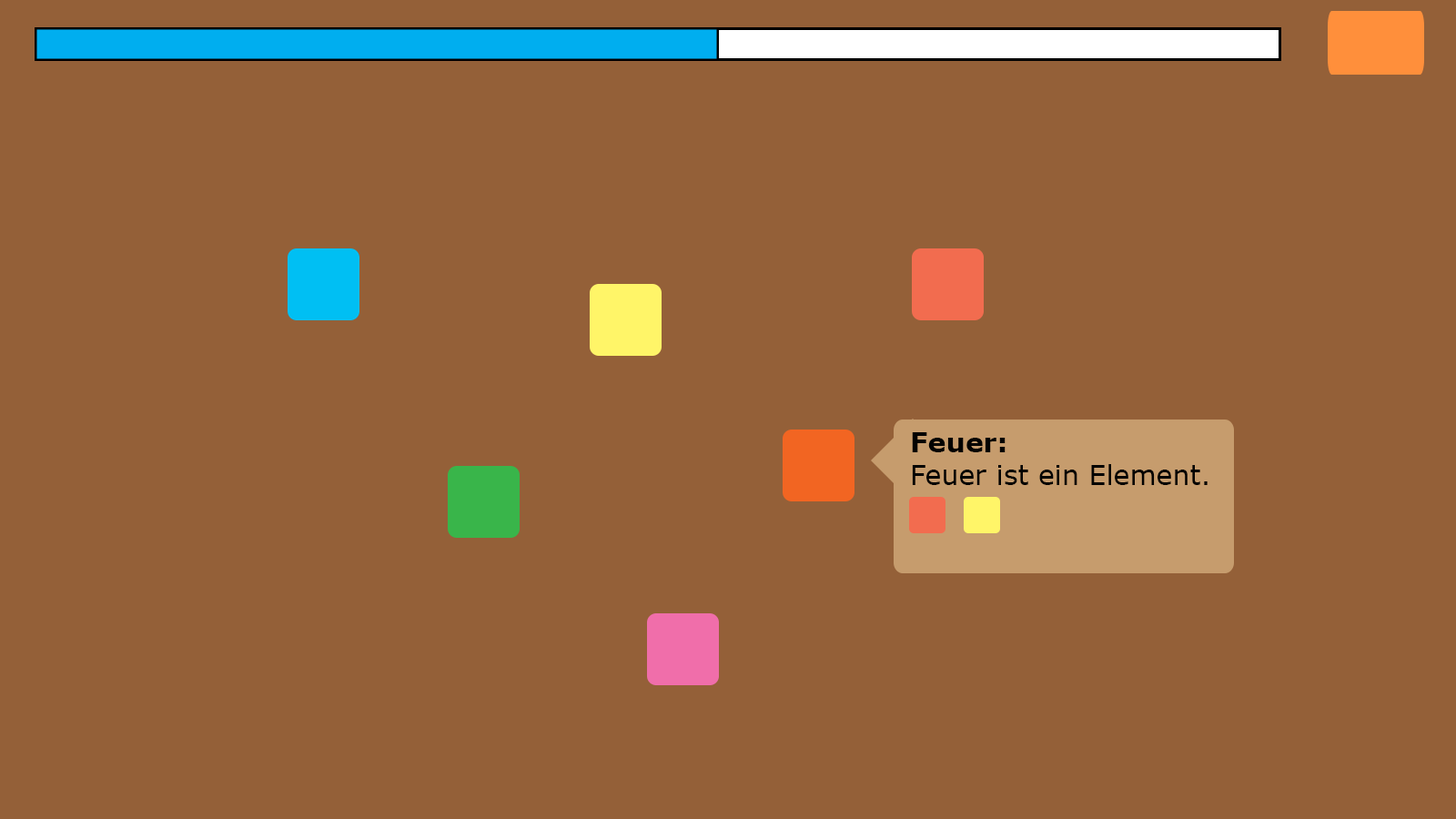
<style>
.page{position:relative;width:1456px;height:819px;background:#946038}
.page>*{position:absolute;margin:0}
.t1{font:27.3px "Verdana";color:#020202}
.t2{font:27.3px "Verdana-Bold";color:#020202}
</style>
<div class="page">
<p class="t1" style="left:912px;top:432px;width:296px;height:53px"><span class="t2">Feuer:<br></span>Feuer ist ein Element.</p>
</div>
